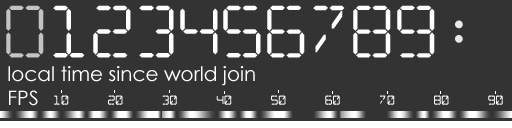
<style>
.page{position:relative;width:512px;height:128px;background:#333333}
.page>*{position:absolute;margin:0}
.t1{font:54.2px "Digitaldream";color:#ffffff}
.t2{font:20px "CenturyGothic";color:#ffffff}
.t3{font:9.7px "DigitaldreamFat";color:#ffffff}
</style>
<div class="page">
<p class="t1" style="left:6px;top:5px;width:457px;height:53px">0123456789:</p>
<p class="t2" style="left:8px;top:66px;width:247px;height:20px">local time since world join</p>
<p class="t2" style="left:9px;top:90px;width:29px;height:16px">FPS</p>
<p class="t3" style="left:54px;top:95px;width:449px;height:10px">10     20     30     40     50     60     70     80     90</p>
</div>
